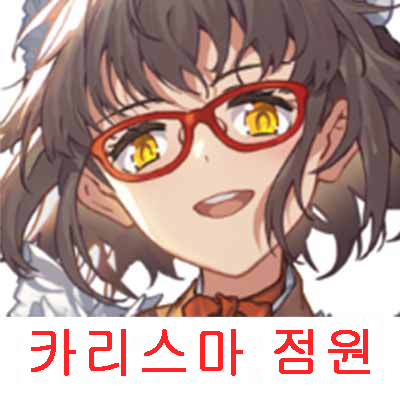
<style>
.page{position:relative;width:400px;height:400px}
.page>*{position:absolute;margin:0}
.t1{font:56.2px "Gulim";letter-spacing:0.04em;color:#ff2227;font-weight:bold;scale:0.93 1}
</style>
<div class="page">
<p class="t1" style="left:31px;top:329px;width:339px;height:47px">카리스마 점원</p>
</div>
